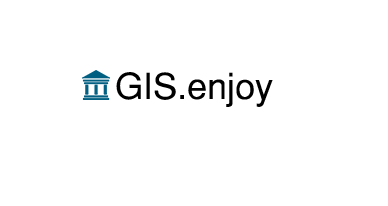
<style>
.page{position:relative;width:388px;height:206px;background:#ffffff}
.page>*{position:absolute;margin:0}
.t1{font:36px "Helvetica-Normal";color:#000000}
</style>
<div class="page">
<p class="t1" style="left:116px;top:72px;width:157px;height:35px">GIS.enjoy</p>
</div>
